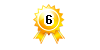
<style>
.page{position:relative;width:100px;height:50px;background:#ffffff}
.page>*{position:absolute;margin:0}
.t1{font:12px "Dotum";color:#000000;font-weight:bold}
</style>
<div class="page">
<p class="t1" style="left:46px;top:15px;width:6px;height:9px">6</p>
</div>
